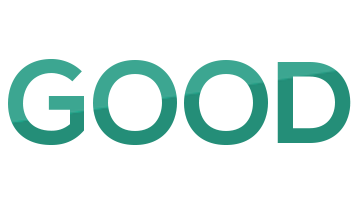
<style>
.page{position:relative;width:362px;height:198px;background:#ffffff}
.page>*{position:absolute;margin:0}
.t1{font:116.2px "NexaBold"}
</style>
<div class="page">
<p class="t1" style="left:8px;top:59px;width:343px;height:86px">GOOD</p>
</div>
